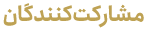
<style>
.page{position:relative;width:147px;height:31px;background:#ffffff}
.page>*{position:absolute;margin:0}
.t1{font:20.7px "Anjoman-Bold";letter-spacing:-0.02em;color:#bea254;scale:1.06 1}
</style>
<div class="page">
<p class="t1" style="left:3px;top:3px;width:141px;height:25px">مشارکت‌کنندگان</p>
</div>
